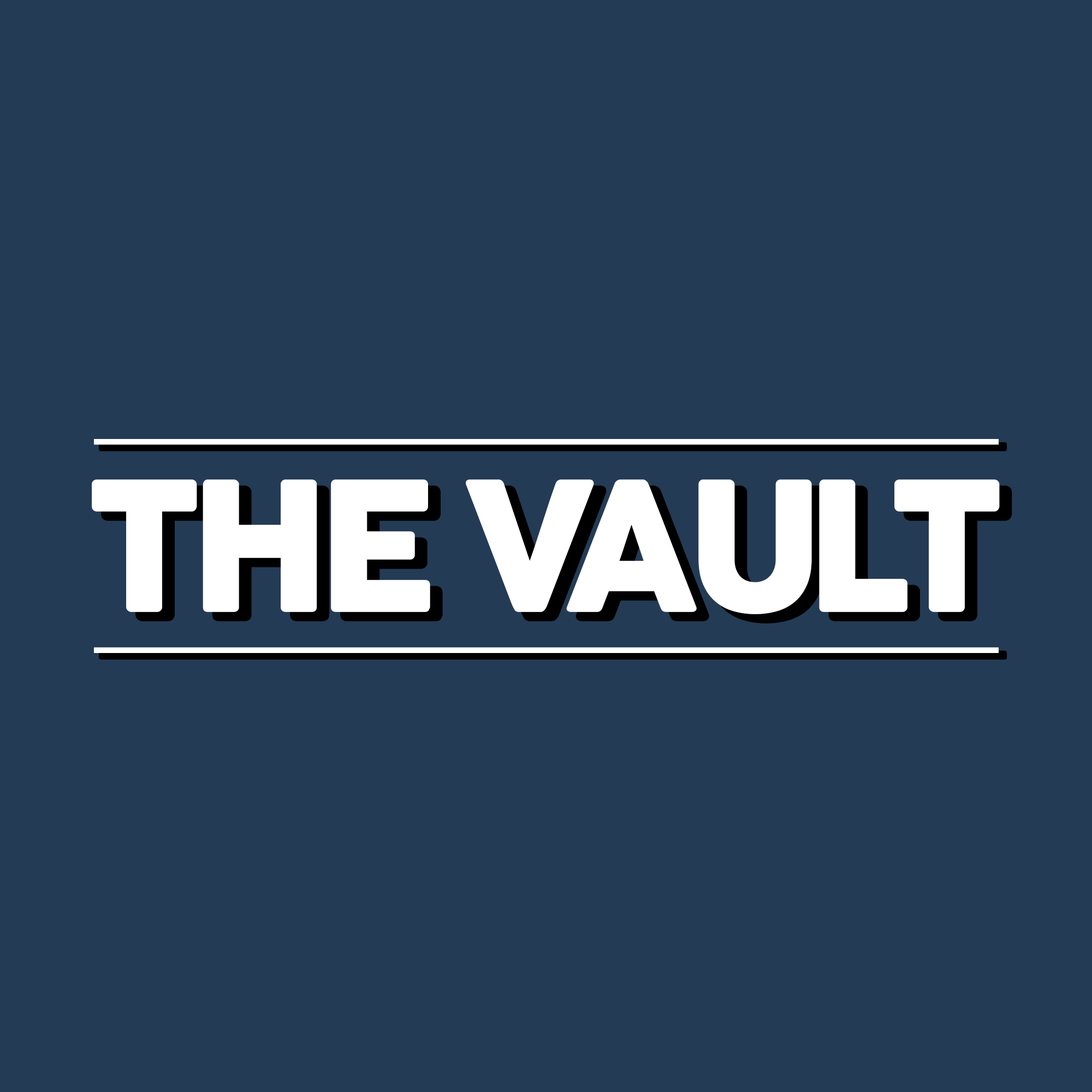
<style>
.page{position:relative;width:1092px;height:1092px;background:#243b55}
.page>*{position:absolute;margin:0}
.t1{font:176px "Cocogoose";letter-spacing:-0.1em;color:#ffffff;font-variant:small-caps;font-weight:bold}
</style>
<div class="page">
<p class="t1" style="left:92px;top:479px;width:908px;height:135px">THE VAULT</p>
</div>
